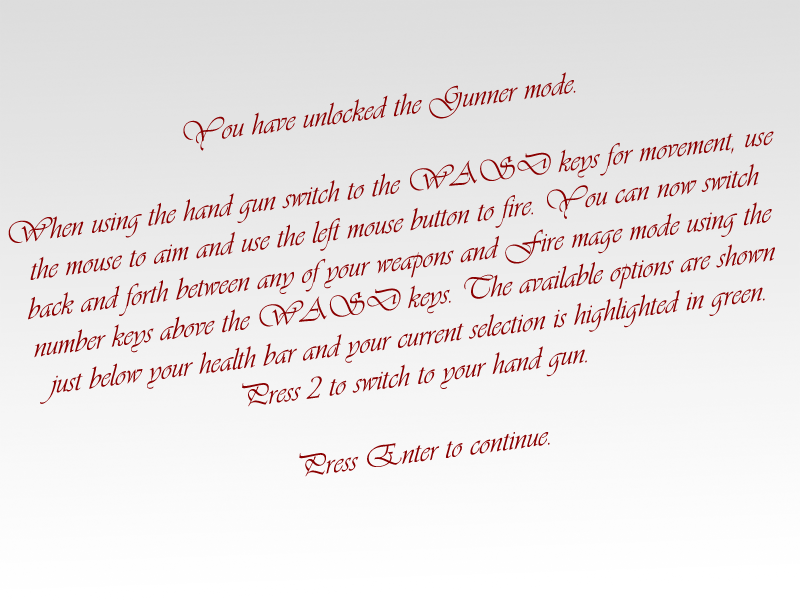
<style>
.page{position:relative;width:800px;height:600px}
.page>*{position:absolute;margin:0}
.t1{font:32px "Vivaldii";color:#8a0000}
</style>
<div class="page">
<p class="t1" style="left:8px;top:72px;width:767px;height:405px;text-align:center;rotate:-7deg">You have unlocked the Gunner mode.<br><br>When using the hand gun switch to the WASD keys for movement, use the mouse to aim and use the left mouse button to fire. You can now switch back and forth between any of your weapons and Fire mage mode using the number keys above the WASD keys. The available options are shown just below your health bar and your current selection is highlighted in green.<br>Press 2 to switch to your hand gun.<br><br>Press Enter to continue.</p>
</div>
